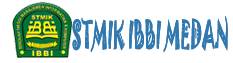
<style>
.page{position:relative;width:233px;height:63px;background:#ffffff}
.page>*{position:absolute;margin:0}
.t1{font:34.1px "Jokerman-Regular";color:#3178af;scale:0.48 1}
</style>
<div class="page">
<p class="t1" style="left:72px;top:17px;width:156px;height:36px">STMIK IBBI MEDAN</p>
<p class="t1" style="left:72px;top:16px;width:156px;height:36px">STMIK IBBI MEDAN</p>
</div>
